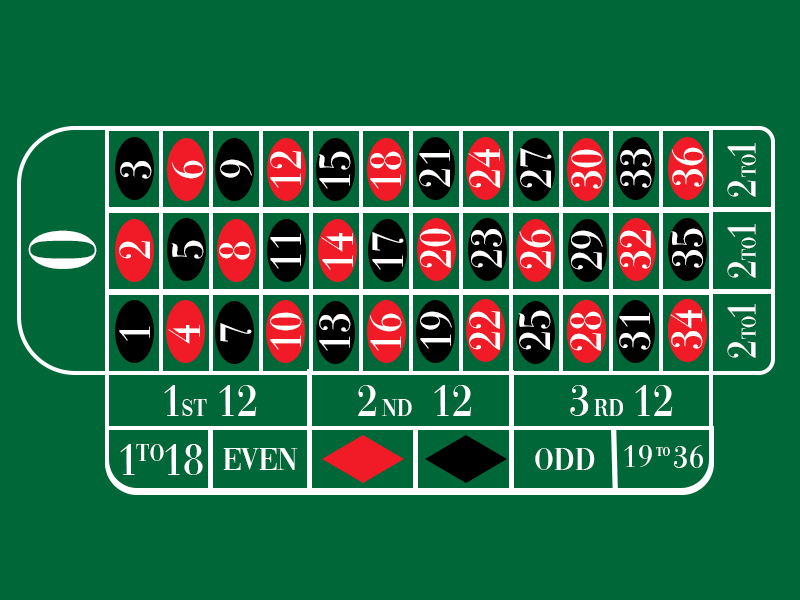
<style>
.page{position:relative;width:800px;height:600px;background:#006738}
.page>*{position:absolute;margin:0}
.t1{font:45.8px "Vogue-Regular";color:#ffffff}
.t2{font:41.7px "Vogue-Regular";color:#ffffff}
.t3{font:20.8px "Vogue-Regular";color:#ffffff}
.t4{font:100px "Vogue-Regular";color:#ffffff}
.t5{font:25px "Vogue-Regular";color:#ffffff}
.t6{font:33.3px "Vogue-Regular";color:#ffffff}
.t7{font:12.5px "Vogue-Regular";color:#ffffff}
</style>
<div class="page">
<p class="t1" style="left:419px;top:149px;width:31px;height:38px;rotate:-90deg">21</p>
<p class="t1" style="left:468px;top:149px;width:32px;height:39px;rotate:-90deg">24</p>
<p class="t1" style="left:520px;top:148px;width:32px;height:40px;rotate:-90deg">27</p>
<p class="t1" style="left:571px;top:149px;width:32px;height:40px;rotate:-90deg">30</p>
<p class="t1" style="left:620px;top:149px;width:32px;height:39px;rotate:-90deg">33</p>
<p class="t1" style="left:671px;top:147px;width:33px;height:40px;rotate:-90deg">36</p>
<p class="t2" style="left:727px;top:143px;width:29px;height:13px;rotate:-90deg">1</p>
<p class="t1" style="left:120px;top:161px;width:32px;height:18px;rotate:-90deg">3</p>
<p class="t1" style="left:171px;top:160px;width:33px;height:19px;rotate:-90deg">6</p>
<p class="t1" style="left:220px;top:159px;width:32px;height:19px;rotate:-90deg">9</p>
<p class="t1" style="left:270px;top:151px;width:31px;height:37px;rotate:-90deg">12</p>
<p class="t1" style="left:318px;top:151px;width:33px;height:38px;rotate:-90deg">15</p>
<p class="t1" style="left:370px;top:151px;width:32px;height:38px;rotate:-90deg">18</p>
<p class="t3" style="left:741px;top:154px;width:15px;height:23px;rotate:-90deg">to</p>
<p class="t2" style="left:727px;top:180px;width:29px;height:17px;rotate:-90deg">2</p>
<p class="t4" style="left:28px;top:230px;width:69px;height:39px;rotate:90deg">0</p>
<p class="t1" style="left:270px;top:233px;width:31px;height:36px;rotate:-90deg">11</p>
<p class="t1" style="left:321px;top:233px;width:32px;height:37px;rotate:-90deg">14</p>
<p class="t1" style="left:372px;top:232px;width:32px;height:38px;rotate:-90deg">17</p>
<p class="t1" style="left:420px;top:228px;width:31px;height:40px;rotate:-90deg">20</p>
<p class="t1" style="left:471px;top:229px;width:31px;height:39px;rotate:-90deg">23</p>
<p class="t1" style="left:519px;top:229px;width:32px;height:40px;rotate:-90deg">26</p>
<p class="t1" style="left:571px;top:230px;width:32px;height:40px;rotate:-90deg">29</p>
<p class="t1" style="left:620px;top:230px;width:31px;height:39px;rotate:-90deg">32</p>
<p class="t1" style="left:671px;top:228px;width:32px;height:40px;rotate:-90deg">35</p>
<p class="t2" style="left:727px;top:224px;width:29px;height:13px;rotate:-90deg">1</p>
<p class="t1" style="left:119px;top:241px;width:31px;height:18px;rotate:-90deg">2</p>
<p class="t1" style="left:171px;top:240px;width:33px;height:19px;rotate:-90deg">5</p>
<p class="t1" style="left:219px;top:241px;width:32px;height:19px;rotate:-90deg">8</p>
<p class="t3" style="left:741px;top:237px;width:15px;height:23px;rotate:-90deg">to</p>
<p class="t2" style="left:727px;top:261px;width:29px;height:17px;rotate:-90deg">2</p>
<p class="t2" style="left:727px;top:304px;width:29px;height:13px;rotate:-90deg">1</p>
<p class="t1" style="left:270px;top:312px;width:32px;height:38px;rotate:-90deg">10</p>
<p class="t1" style="left:319px;top:314px;width:32px;height:37px;rotate:-90deg">13</p>
<p class="t1" style="left:369px;top:313px;width:33px;height:38px;rotate:-90deg">16</p>
<p class="t1" style="left:420px;top:311px;width:32px;height:38px;rotate:-90deg">19</p>
<p class="t1" style="left:469px;top:311px;width:31px;height:39px;rotate:-90deg">22</p>
<p class="t1" style="left:518px;top:310px;width:33px;height:40px;rotate:-90deg">25</p>
<p class="t1" style="left:570px;top:311px;width:32px;height:40px;rotate:-90deg">28</p>
<p class="t1" style="left:619px;top:312px;width:32px;height:38px;rotate:-90deg">31</p>
<p class="t1" style="left:670px;top:310px;width:33px;height:39px;rotate:-90deg">34</p>
<p class="t3" style="left:741px;top:316px;width:15px;height:23px;rotate:-90deg">to</p>
<p class="t1" style="left:119px;top:326px;width:31px;height:15px;rotate:-90deg">1</p>
<p class="t1" style="left:168px;top:325px;width:32px;height:19px;rotate:-90deg">4</p>
<p class="t1" style="left:220px;top:323px;width:32px;height:19px;rotate:-90deg">7</p>
<p class="t2" style="left:727px;top:341px;width:29px;height:17px;rotate:-90deg">2</p>
<p class="t1" style="left:164px;top:385px;width:15px;height:31px">1</p>
<p class="t1" style="left:219px;top:385px;width:38px;height:31px">12</p>
<p class="t1" style="left:358px;top:385px;width:19px;height:31px">2</p>
<p class="t1" style="left:434px;top:385px;width:38px;height:31px">12</p>
<p class="t1" style="left:570px;top:385px;width:19px;height:31px">3</p>
<p class="t1" style="left:635px;top:385px;width:38px;height:31px">12</p>
<p class="t5" style="left:182px;top:399px;width:25px;height:17px">st</p>
<p class="t5" style="left:382px;top:399px;width:30px;height:17px">nd</p>
<p class="t5" style="left:594px;top:399px;width:29px;height:17px">rd</p>
<p class="t1" style="left:120px;top:444px;width:15px;height:31px">1</p>
<p class="t5" style="left:136px;top:444px;width:28px;height:17px">to</p>
<p class="t1" style="left:165px;top:444px;width:38px;height:31px">18</p>
<p class="t6" style="left:223px;top:448px;width:75px;height:22px">even</p>
<p class="t6" style="left:535px;top:448px;width:60px;height:22px">odd</p>
<p class="t6" style="left:624px;top:445px;width:28px;height:22px">19</p>
<p class="t7" style="left:656px;top:447px;width:14px;height:9px">to</p>
<p class="t6" style="left:674px;top:445px;width:29px;height:23px">36</p>
</div>
